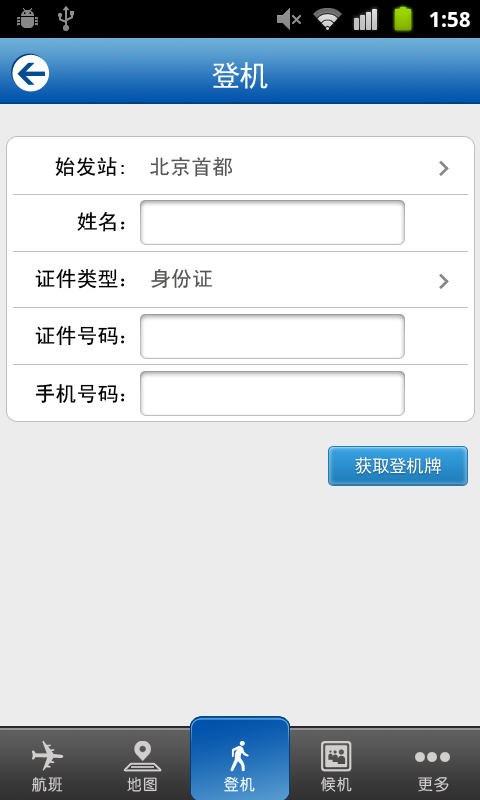
<style>
.page{position:relative;width:480px;height:800px;background:#ececec}
.page>*{position:absolute;margin:0}
.t1{font:30px "SimHei";color:#ffffff;text-transform:uppercase}
.t2{font:21px "SimHei";color:#000000}
.t3{font:21px "SimHei";color:#555554}
.t4{font:18px "SimHei";color:#ffffff;text-transform:uppercase}
.t5{font:16px "CTZhongYuanSJ";color:#d1cece}
.t6{font:16px "CTZhongYuanSJ";color:#ffffff}
</style>
<div class="page">
<p class="t1" style="left:212px;top:62px;width:56px;height:27px">登机</p>
<p class="t2" style="left:55px;top:156px;width:178px;height:21px">始发站:  <span class="t3">北京首都</span></p>
<p class="t2" style="left:77px;top:212px;width:48px;height:20px">姓名：</p>
<p class="t2" style="left:35px;top:268px;width:177px;height:21px">证件类型： <span class="t3">身份证</span></p>
<p class="t2" style="left:35px;top:325px;width:90px;height:21px">证件号码：</p>
<p class="t2" style="left:35px;top:384px;width:90px;height:20px">手机号码：</p>
<p class="t4" style="left:355px;top:457px;width:86px;height:18px">获取登机牌</p>
<p class="t5" style="left:32px;top:777px;width:31px;height:15px">航班</p>
<p class="t5" style="left:127px;top:777px;width:30px;height:15px">地图</p>
<p class="t6" style="left:224px;top:777px;width:31px;height:15px">登机</p>
<p class="t5" style="left:321px;top:777px;width:31px;height:15px">候机</p>
<p class="t5" style="left:418px;top:777px;width:31px;height:15px">更多</p>
</div>
